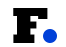
<style>
.page{position:relative;width:66px;height:47px;background:#ffffff}
.page>*{position:absolute;margin:0}
.t1{font:52.5px "Rockwell-ExtraBold";color:#000000;scale:0.96 1}
</style>
<div class="page">
<p class="t1" style="left:13px;top:8px;width:35px;height:35px">F</p>
</div>
